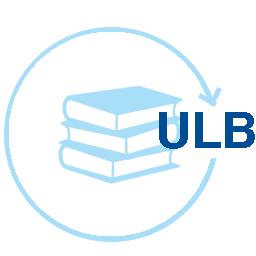
<style>
.page{position:relative;width:256px;height:256px;background:#ffffff}
.page>*{position:absolute;margin:0}
.t1{font:50px "Helvetica-Bold";color:#004d95}
</style>
<div class="page">
<p class="t1" style="left:159px;top:112px;width:96px;height:37px">ULB</p>
</div>
